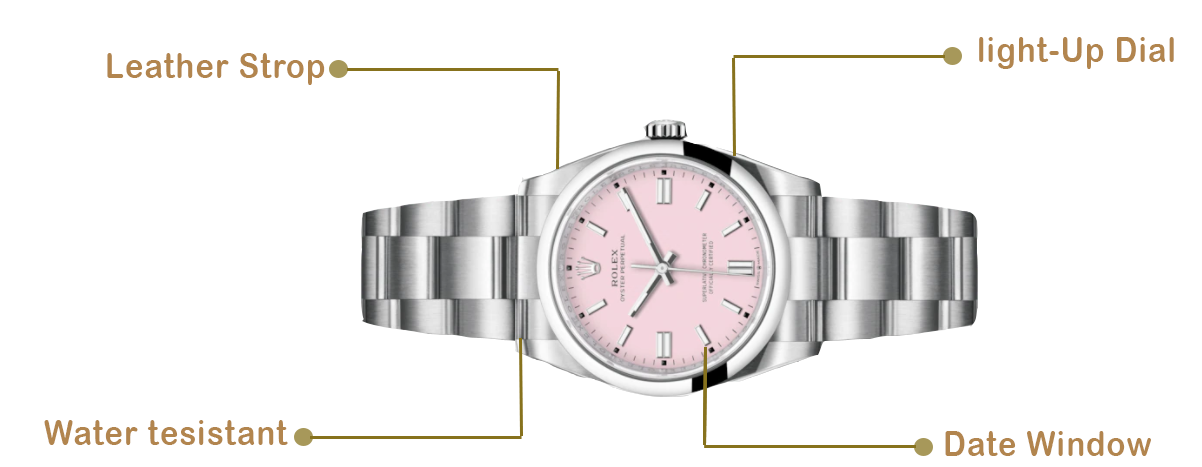
<style>
.page{position:relative;width:1202px;height:467px;background:#ffffff}
.page>*{position:absolute;margin:0}
.t1{font:34.7px "ArialRoundedMTBold";letter-spacing:0.04em;color:#b2854e;scale:0.89 1}
</style>
<div class="page">
<p class="t1" style="left:979px;top:37px;width:195px;height:32px">light-Up Dial</p>
<p class="t1" style="left:107px;top:53px;width:218px;height:32px">Leather Strop</p>
<p class="t1" style="left:44px;top:420px;width:244px;height:25px">Water tesistant</p>
<p class="t1" style="left:945px;top:431px;width:206px;height:25px">Date Window</p>
</div>
